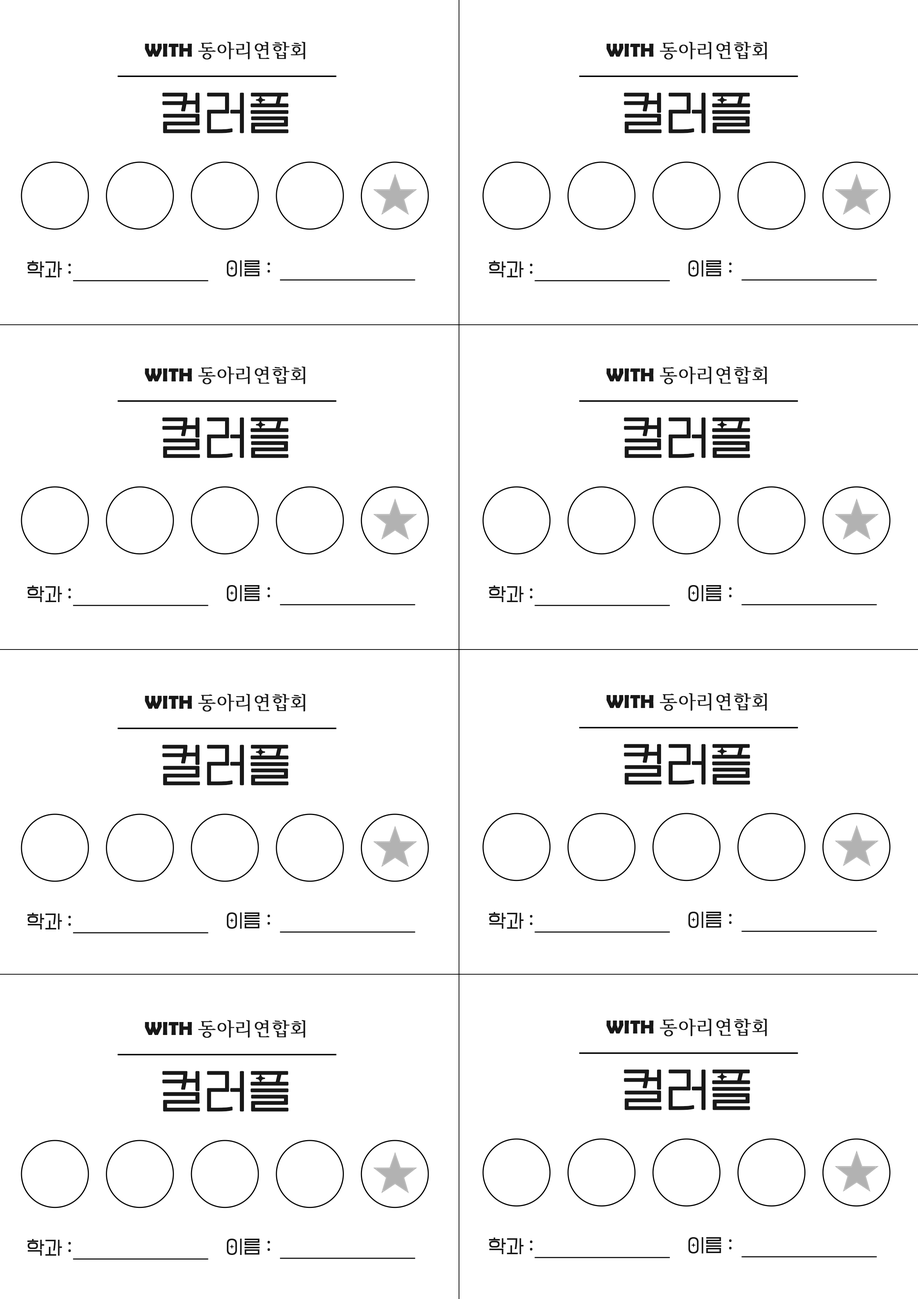
<style>
.page{position:relative;width:918px;height:1299px;background:#ffffff}
.page>*{position:absolute;margin:0}
.t1{font:18.5px "HCRBatang";color:#181818;font-weight:bold}
.t2{font:18.5px "BerlinSansFBDemi-Bold";color:#181818;font-weight:bold}
.t3{font:46.3px "PyeongChangPeace-Light";color:#181818;font-weight:bold}
.t4{font:18.5px "PyeongChangPeace-Light";color:#181818;font-weight:bold}
.t5{font:18.5px "Gulim";color:#181818;font-weight:bold}
</style>
<div class="page">
<p class="t1" style="left:145px;top:41px;width:160px;height:19px"><span class="t2">WITH </span>동아리연합회</p>
<p class="t1" style="left:606px;top:41px;width:161px;height:19px"><span class="t2">WITH </span>동아리연합회</p>
<p class="t3" style="left:162px;top:93px;width:127px;height:40px">컬러플</p>
<p class="t3" style="left:624px;top:93px;width:126px;height:40px">컬러플</p>
<p class="t4" style="left:27px;top:261px;width:44px;height:16px">학과 <span class="t5">:</span></p>
<p class="t4" style="left:227px;top:260px;width:43px;height:17px">이름 <span class="t5">:</span></p>
<p class="t4" style="left:489px;top:261px;width:44px;height:16px">학과 <span class="t5">:</span></p>
<p class="t4" style="left:688px;top:260px;width:44px;height:17px">이름 <span class="t5">:</span></p>
<p class="t1" style="left:145px;top:366px;width:160px;height:18px"><span class="t2">WITH </span>동아리연합회</p>
<p class="t1" style="left:606px;top:366px;width:161px;height:18px"><span class="t2">WITH </span>동아리연합회</p>
<p class="t3" style="left:162px;top:417px;width:127px;height:41px">컬러플</p>
<p class="t3" style="left:624px;top:417px;width:126px;height:41px">컬러플</p>
<p class="t4" style="left:27px;top:585px;width:44px;height:17px">학과 <span class="t5">:</span></p>
<p class="t4" style="left:227px;top:585px;width:43px;height:16px">이름 <span class="t5">:</span></p>
<p class="t4" style="left:489px;top:585px;width:44px;height:17px">학과 <span class="t5">:</span></p>
<p class="t4" style="left:688px;top:585px;width:44px;height:16px">이름 <span class="t5">:</span></p>
<p class="t1" style="left:145px;top:693px;width:160px;height:19px"><span class="t2">WITH </span>동아리연합회</p>
<p class="t1" style="left:606px;top:693px;width:161px;height:18px"><span class="t2">WITH </span>동아리연합회</p>
<p class="t3" style="left:162px;top:745px;width:127px;height:40px">컬러플</p>
<p class="t3" style="left:624px;top:744px;width:126px;height:40px">컬러플</p>
<p class="t4" style="left:27px;top:913px;width:44px;height:16px">학과 <span class="t5">:</span></p>
<p class="t4" style="left:227px;top:912px;width:43px;height:17px">이름 <span class="t5">:</span></p>
<p class="t4" style="left:489px;top:912px;width:44px;height:17px">학과 <span class="t5">:</span></p>
<p class="t4" style="left:688px;top:911px;width:44px;height:17px">이름 <span class="t5">:</span></p>
<p class="t1" style="left:145px;top:1020px;width:160px;height:18px"><span class="t2">WITH </span>동아리연합회</p>
<p class="t1" style="left:606px;top:1018px;width:161px;height:18px"><span class="t2">WITH </span>동아리연합회</p>
<p class="t3" style="left:162px;top:1071px;width:127px;height:40px">컬러플</p>
<p class="t3" style="left:624px;top:1069px;width:126px;height:41px">컬러플</p>
<p class="t4" style="left:27px;top:1239px;width:44px;height:16px">학과 <span class="t5">:</span></p>
<p class="t4" style="left:227px;top:1238px;width:43px;height:17px">이름 <span class="t5">:</span></p>
<p class="t4" style="left:489px;top:1237px;width:44px;height:17px">학과 <span class="t5">:</span></p>
<p class="t4" style="left:688px;top:1237px;width:44px;height:16px">이름 <span class="t5">:</span></p>
</div>
